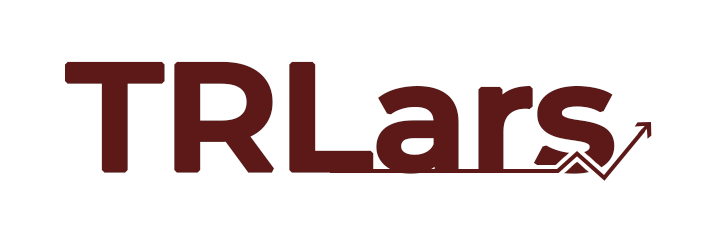
<style>
.page{position:relative;width:720px;height:227px;background:#ffffff}
.page>*{position:absolute;margin:0}
.t1{font:150.7px "Montserrat-SemiBold";letter-spacing:-0.03em;color:#5d1918;font-weight:bold;scale:1.05 1}
</style>
<div class="page">
<p class="t1" style="left:65px;top:61px;width:550px;height:113px">TRLars</p>
</div>
